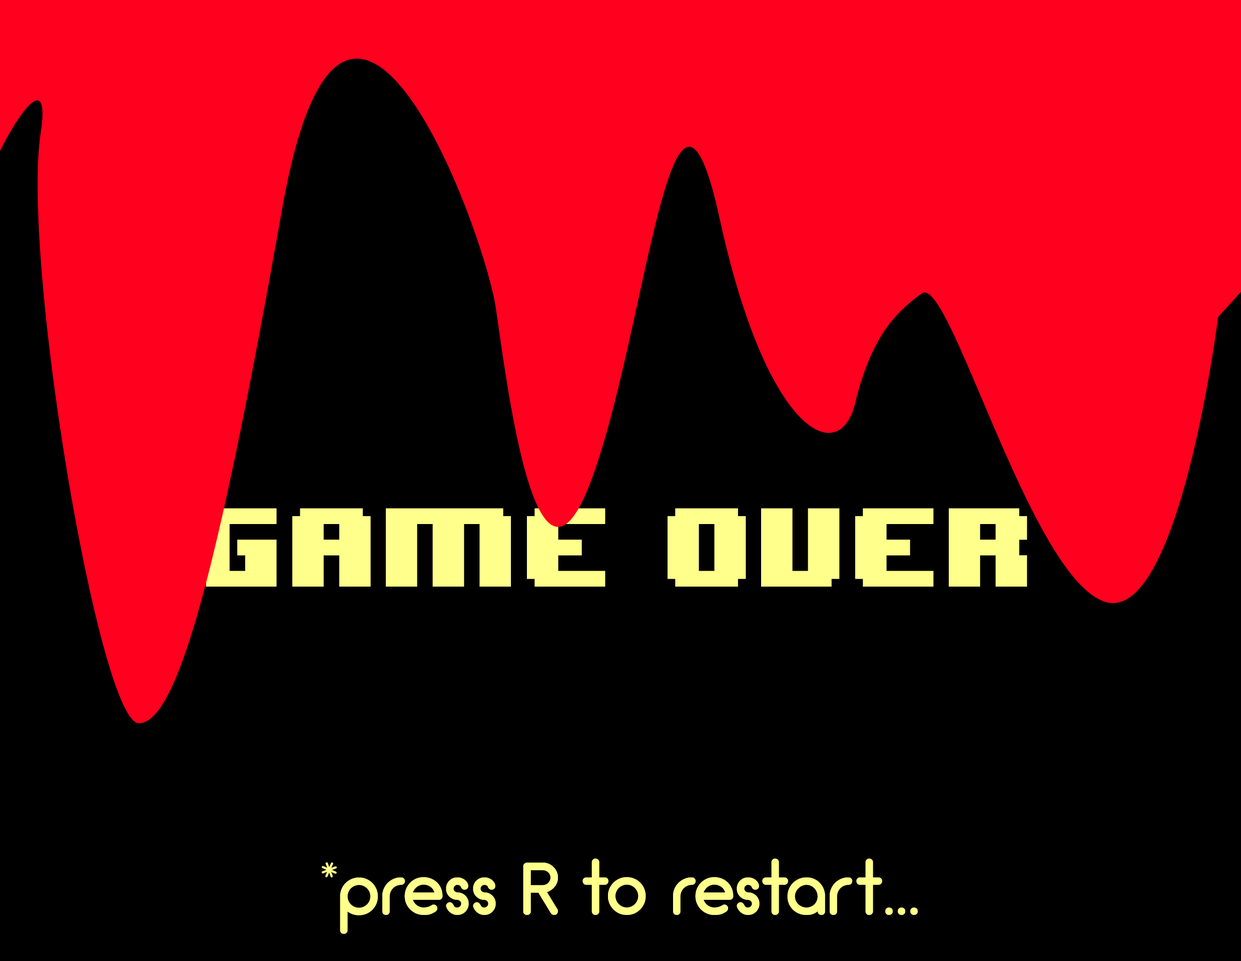
<style>
.page{position:relative;width:1241px;height:961px;background:#000000}
.page>*{position:absolute;margin:0}
.t1{font:93.8px "8BITWONDERNominal";color:#ffff8c}
.t2{font:75.1px "Arciform";color:#ffff8c}
</style>
<div class="page">
<p class="t1" style="left:198px;top:508px;width:829px;height:79px">GAme over</p>
<p class="t2" style="left:322px;top:858px;width:596px;height:76px">*press R to restart...</p>
</div>
